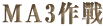
<style>
.page{position:relative;width:103px;height:26px;background:#ffffff}
.page>*{position:absolute;margin:0}
.t1{font:24px "RyuminPro-ExBold";letter-spacing:0.1em;font-weight:bold;scale:0.87 1}
</style>
<div class="page">
<p class="t1" style="left:2px;top:1px;width:101px;height:24px">MA3作戰</p>
</div>
